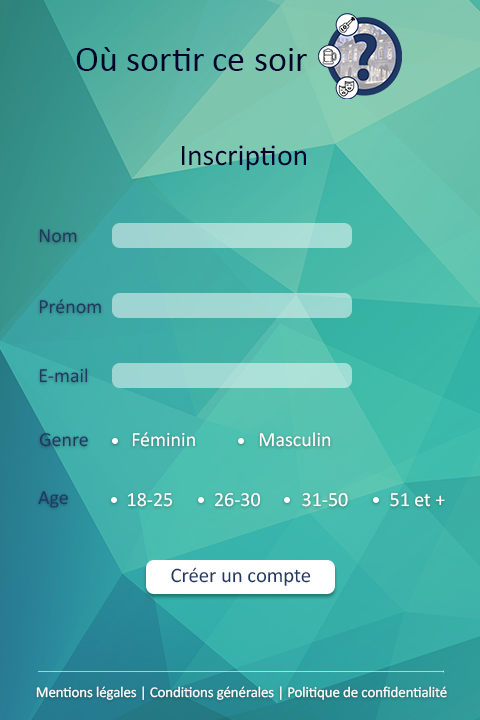
<style>
.page{position:relative;width:480px;height:720px}
.page>*{position:absolute;margin:0}
.t1{font:36px "Calibri";color:#00022e}
.t2{font:30px "Calibri";color:#00022e}
.t3{font:20px "Calibri";color:#203863}
.t4{font:20px "Calibri";color:#ffffff}
.t5{font:20.7px "Calibri";color:#203864}
.t6{font:15px "Calibri";letter-spacing:-0.01em;color:#ffffff}
</style>
<div class="page">
<p class="t1" style="left:76px;top:47px;width:231px;height:24px">Où sortir ce soir</p>
<p class="t2" style="left:182px;top:145px;width:124px;height:26px">Inscription</p>
<p class="t3" style="left:39px;top:229px;width:38px;height:14px">Nom</p>
<p class="t3" style="left:39px;top:299px;width:62px;height:15px">Prénom</p>
<p class="t3" style="left:39px;top:368px;width:49px;height:15px">E-mail</p>
<p class="t3" style="left:39px;top:433px;width:49px;height:14px">Genre</p>
<p class="t4" style="left:132px;top:432px;width:63px;height:15px">Féminin</p>
<p class="t4" style="left:259px;top:432px;width:72px;height:15px">Masculin</p>
<p class="t3" style="left:38px;top:491px;width:30px;height:17px">Age</p>
<p class="t4" style="left:128px;top:493px;width:45px;height:14px">18-25</p>
<p class="t4" style="left:215px;top:493px;width:46px;height:14px">26-30</p>
<p class="t4" style="left:302px;top:493px;width:46px;height:14px">31-50</p>
<p class="t4" style="left:390px;top:493px;width:55px;height:14px">51 et +</p>
<p class="t5" style="left:171px;top:567px;width:140px;height:19px">Créer un compte</p>
<p class="t6" style="left:36px;top:686px;width:411px;height:14px">Mentions légales | Conditions générales | Politique de confidentialité</p>
</div>
